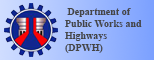
<style>
.page{position:relative;width:154px;height:60px}
.page>*{position:absolute;margin:0}
.t1{font:10px "TimesNewRomanPS-BoldMT";color:#454545}
</style>
<div class="page">
<p class="t1" style="left:65px;top:8px;width:77px;height:45px;text-align:right">Department of <br>Public Works and<br>Highways<br>(DPWH)</p>
</div>
